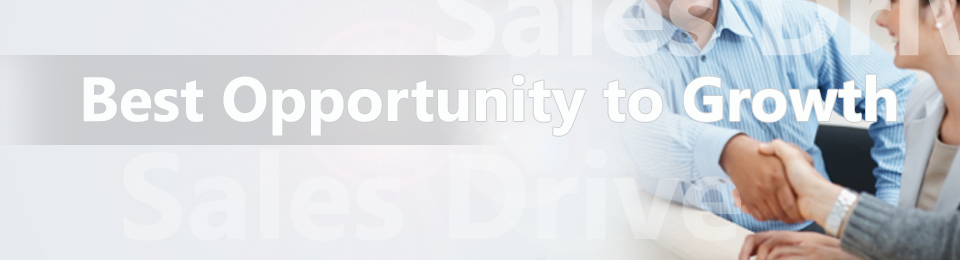
<style>
.page{position:relative;width:960px;height:260px}
.page>*{position:absolute;margin:0}
.t1{font:62.2px "SegoeUI-Bold";color:#fcfdfd}
</style>
<div class="page">
<p class="t1" style="left:83px;top:74px;width:814px;height:62px">Best Opportunity to Growth</p>
</div>
